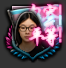
<style>
.page{position:relative;width:66px;height:68px}
.page>*{position:absolute;margin:0}
.t1{font:21px "STXingkai";letter-spacing:-0.35em;font-weight:bold}
.t2{font:21px "HYPixel-11px-U";letter-spacing:-0.2em;font-weight:bold}
</style>
<div class="page">
<p class="t1" style="left:29px;top:3px;width:33px;height:20px">包容<span class="t2">！</span></p>
<p class="t1" style="left:28px;top:25px;width:34px;height:22px">平等<span class="t2">！</span></p>
</div>
